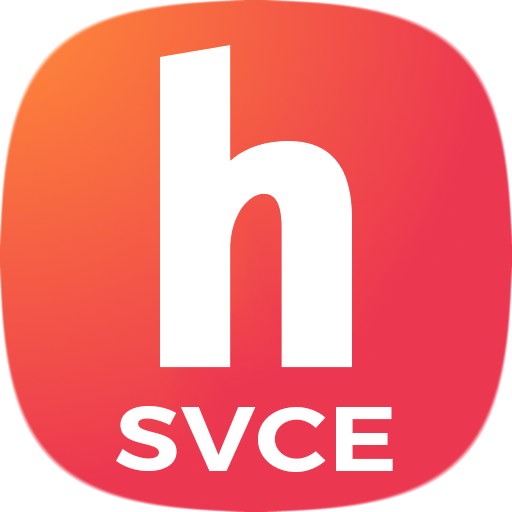
<style>
.page{position:relative;width:512px;height:512px;background:#ffffff}
.page>*{position:absolute;margin:0}
.t1{font:92px "Montserrat-SemiBold";letter-spacing:0.01em;color:#ffffff;scale:1.13 1}
</style>
<div class="page">
<p class="t1" style="left:116px;top:405px;width:277px;height:67px">SVCE</p>
</div>
